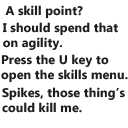
<style>
.page{position:relative;width:128px;height:128px;background:#ffffff}
.page>*{position:absolute;margin:0}
.t1{font:12.5px "MicrosoftPhagsPa-Bold";letter-spacing:0.01em;color:#1e1e1e}
</style>
<div class="page">
<p class="t1" style="left:5px;top:5px;width:78px;height:14px">A skill point?</p>
<p class="t1" style="left:2px;top:22px;width:116px;height:29px">I should spend that <br>on agility.</p>
<p class="t1" style="left:1px;top:54px;width:127px;height:29px">Press the U key to <br>open the skills menu.</p>
<p class="t1" style="left:2px;top:87px;width:123px;height:26px">Spikes, those thing’s <br>could kill me.</p>
</div>
